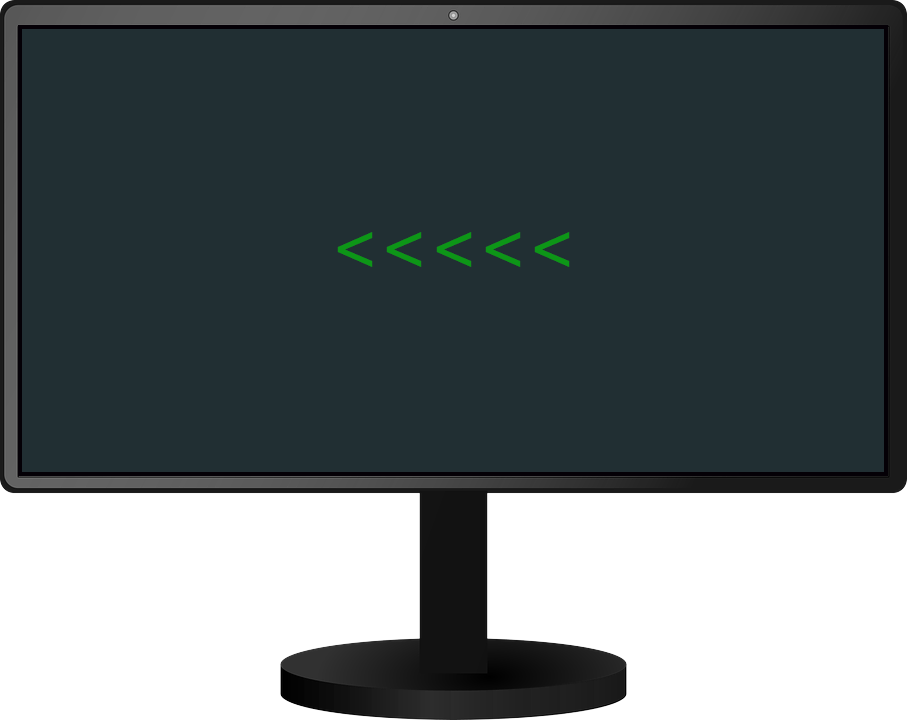
<style>
.page{position:relative;width:907px;height:720px;background:#212f33}
.page>*{position:absolute;margin:0}
.t1{font:72px "ArialMT";letter-spacing:0.1em;color:#0d9617}
</style>
<div class="page">
<p class="t1" style="left:337px;top:232px;width:233px;height:35px">&lt;&lt;&lt;&lt;&lt;</p>
</div>
